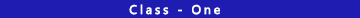
<style>
.page{position:relative;width:360px;height:18px;background:#1f1cb1}
.page>*{position:absolute;margin:0}
.t1{font:12.5px "MicrosoftNewTaiLue";letter-spacing:0.2em;color:#ffffff;font-weight:bold}
</style>
<div class="page">
<p class="t1" style="left:129px;top:4px;width:91px;height:11px">Class - One</p>
</div>
